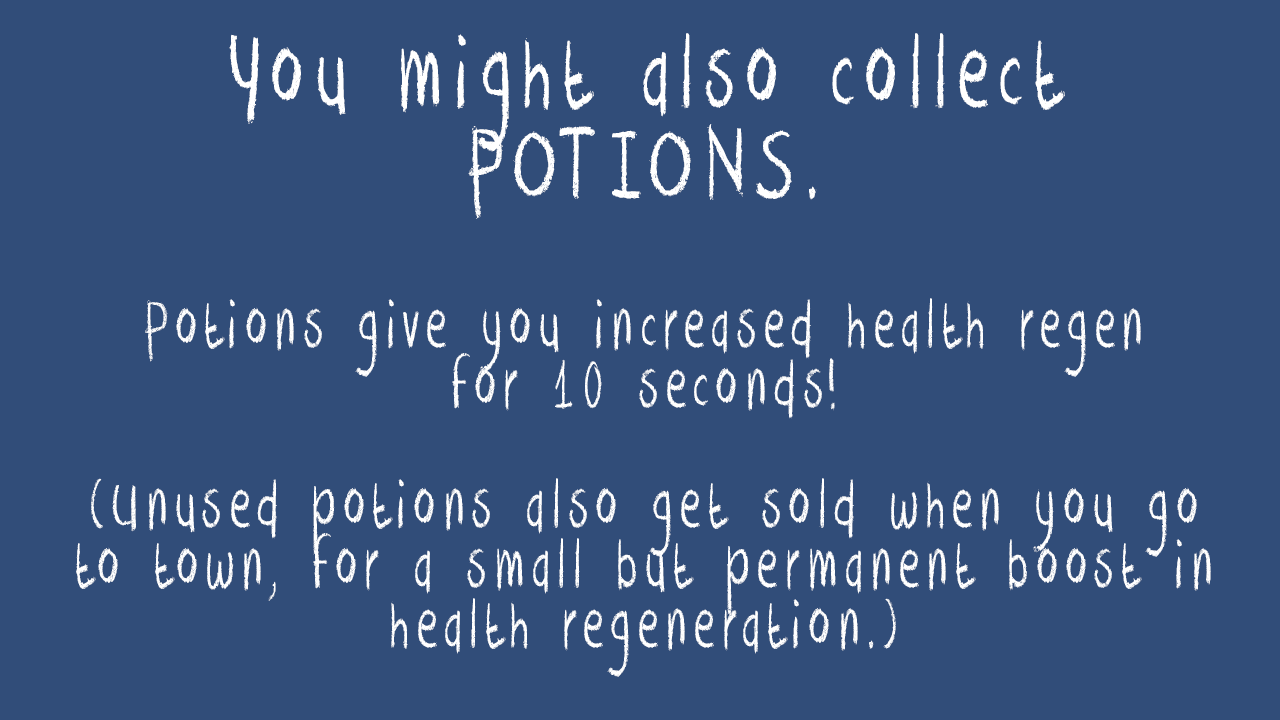
<style>
.page{position:relative;width:1280px;height:720px;background:#314d79}
.page>*{position:absolute;margin:0}
.t1{font:78.5px "DKCrayonCrumble";letter-spacing:0.159em;color:#ffffff;scale:0.64 1}
.t2{font:117.8px "DKCrayonCrumble";letter-spacing:0.159em;color:#ffffff;scale:0.64 1}
</style>
<div class="page">
<p class="t1" style="left:76px;top:33px;width:1135px;height:644px;text-align:center"><span class="t2">You might also collect<br>POTIONS.<br><br></span>Potions give you increased health regen<br>for 10 seconds!<br><br>(Unused potions also get sold when you go to town, for a small but permanent boost in health regeneration.)</p>
</div>
